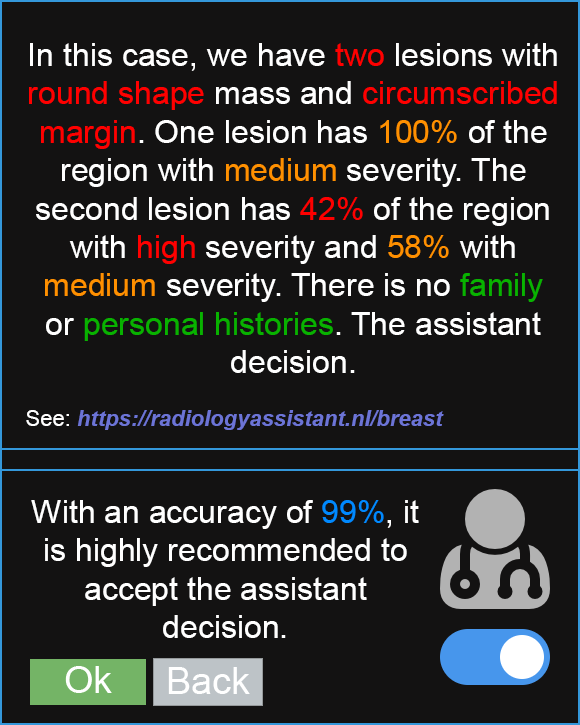
<style>
.page{position:relative;width:580px;height:725px;background:#131212}
.page>*{position:absolute;margin:0}
.t1{font:22px "Arial-BoldItalicMT";color:#6c74d6}
.t2{font:32px "ArialMT";color:#ffffff}
.t3{font:32px "ArialMT";color:#ff0000}
.t4{font:32px "ArialMT";color:#ff9000}
.t5{font:32px "ArialMT";color:#08b300}
.t6{font:32px "ArialMT";color:#08b200}
.t7{font:22px "ArialMT";color:#ffffff}
.t8{font:32px "ArialMT";color:#0089fe}
</style>
<div class="page">
<p class="t1" style="left:26px;top:43px;width:531px;height:387px;text-align:center"><span class="t2">In this case, we have </span><span class="t3">two</span><span class="t2"> lesions with </span><span class="t3">round shape</span><span class="t2"> mass and </span><span class="t3">circumscribed margin</span><span class="t2">. One lesion has </span><span class="t4">100%</span><span class="t2"> of the region with </span><span class="t4">medium</span><span class="t2"> severity. The second lesion has </span><span class="t3">42%</span><span class="t2"> of the region with </span><span class="t3">high</span><span class="t2"> severity and </span><span class="t4">58%</span><span class="t2"> with </span><span class="t4">medium</span><span class="t2"> severity. There is no </span><span class="t5">family </span><span class="t2">or </span><span class="t6">personal histories</span><span class="t2">. The assistant decision.<br></span><span class="t7"><br>See: </span>https://radiologyassistant.nl/breast</p>
<p class="t2" style="left:31px;top:500px;width:388px;height:138px;text-align:center">With an accuracy of <span class="t8">99%</span>, it is highly recommended to accept the assistant decision.</p>
</div>
